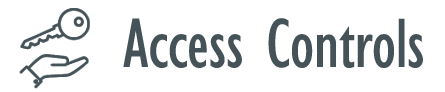
<style>
.page{position:relative;width:445px;height:92px;background:#ffffff}
.page>*{position:absolute;margin:0}
.t1{font:72px "GillSansMT-Condensed";letter-spacing:-0.01em;color:#455359}
</style>
<div class="page">
<p class="t1" style="left:123px;top:18px;width:300px;height:50px">Access Controls</p>
</div>
